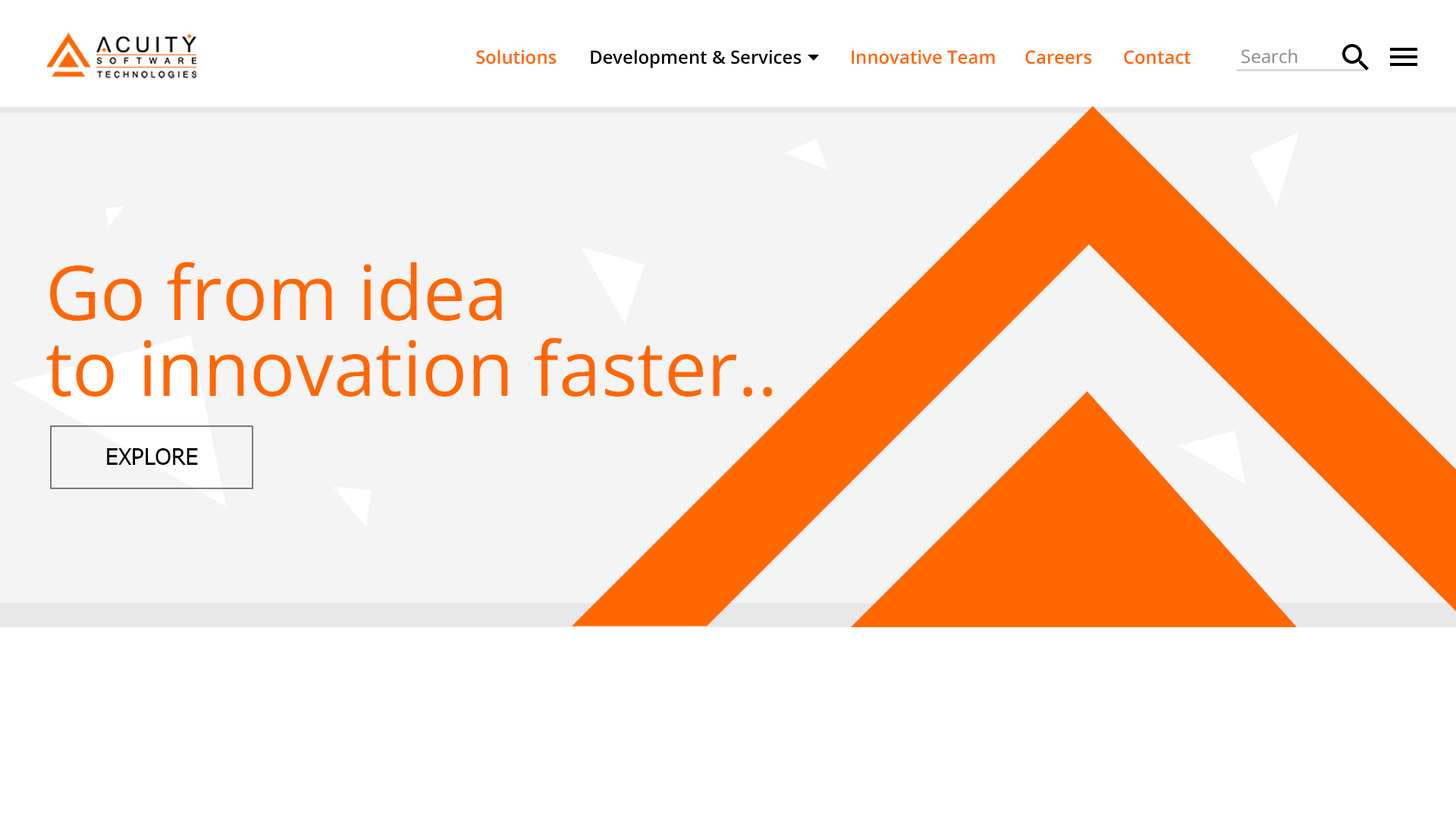
<style>
.page{position:relative;width:1456px;height:819px;background:#f4f4f4}
.page>*{position:absolute;margin:0}
.t1{font:18.2px "OpenSansRoman-SemiBold";color:#ff6701}
.t2{font:18.2px "OpenSansRoman-SemiBold";color:#000000}
.t3{font:18.2px "OpenSans-Regular";color:#8b8b8b}
.t4{font:75.8px/75.8px "OpenSans-Regular";color:#ff6701}
.t5{font:22.7px "Tahoma";color:#000000}
</style>
<div class="page">
<p class="t1" style="left:476px;top:49px;width:81px;height:15px">Solutions</p>
<p class="t2" style="left:591px;top:49px;width:211px;height:19px">Development &amp; Services</p>
<p class="t1" style="left:852px;top:49px;width:143px;height:15px">Innovative Team</p>
<p class="t1" style="left:1025px;top:50px;width:67px;height:14px">Careers</p>
<p class="t1" style="left:1124px;top:50px;width:67px;height:14px">Contact</p>
<p class="t3" style="left:1241px;top:49px;width:56px;height:15px">Search</p>
<p class="t4" style="left:46px;top:262px;width:726px;height:135px">Go from idea <br>to innovation faster..</p>
<p class="t5" style="left:107px;top:448px;width:91px;height:17px">EXPLORE</p>
</div>
